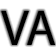
<style>
.page{position:relative;width:56px;height:56px;background:#ffffff}
.page>*{position:absolute;margin:0}
.t1{font:50px "MyriadPro-Regular";color:#000000}
</style>
<div class="page">
<p class="t1" style="left:1px;top:11px;width:55px;height:34px">VA</p>
</div>
